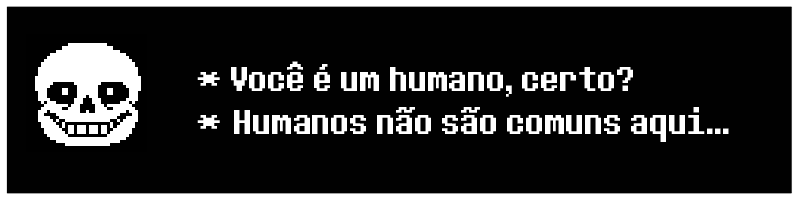
<style>
.page{position:relative;width:800px;height:200px;background:#010101}
.page>*{position:absolute;margin:0}
.t1{font:36px "DeterminationSans";color:#ffffff}
</style>
<div class="page">
<p class="t1" style="left:197px;top:61px;width:532px;height:81px">* Você é um humano, certo?<br>* Humanos não são comuns aqui...</p>
</div>
